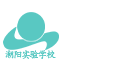
<style>
.page{position:relative;width:126px;height:67px;background:#ffffff}
.page>*{position:absolute;margin:0}
.t1{font:9.6px "AdobeKaitiStd-Regular";letter-spacing:-0.14em;color:#59c8c2}
</style>
<div class="page">
<p class="t1" style="left:5px;top:50px;width:51px;height:9px">潮阳实验学校</p>
</div>
